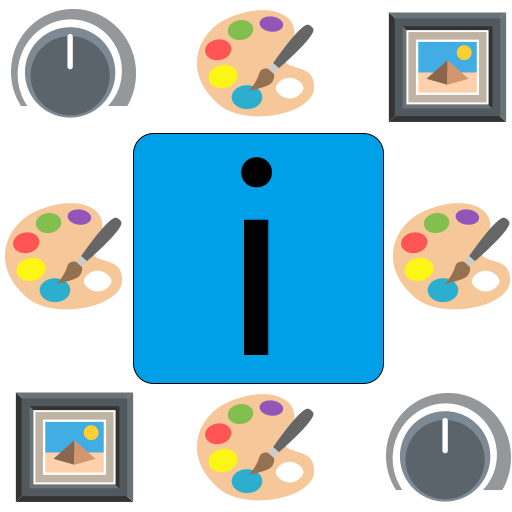
<style>
.page{position:relative;width:512px;height:512px;background:#ffffff}
.page>*{position:absolute;margin:0}
.t1{font:250px "MicrosoftYaHei";color:#000000}
</style>
<div class="page">
<p class="t1" style="left:241px;top:157px;width:31px;height:198px">i</p>
</div>
